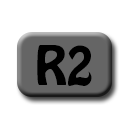
<style>
.page{position:relative;width:128px;height:128px;background:#ffffff}
.page>*{position:absolute;margin:0}
.t1{font:48px "HoboStd";color:#000000}
</style>
<div class="page">
<p class="t1" style="left:37px;top:45px;width:55px;height:41px">R2</p>
</div>
